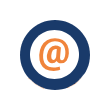
<style>
.page{position:relative;width:110px;height:110px;background:#ffffff}
.page>*{position:absolute;margin:0}
.t1{font:36px "Roboto-Black";color:#f0843b}
</style>
<div class="page">
<p class="t1" style="left:39px;top:38px;width:31px;height:33px">@</p>
</div>
